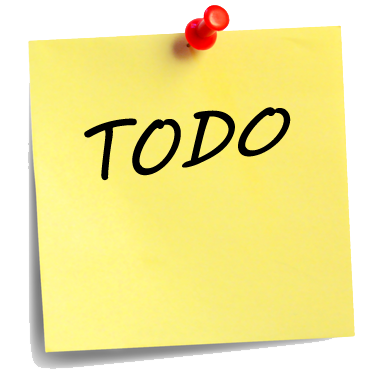
<style>
.page{position:relative;width:375px;height:375px;background:#ffffff}
.page>*{position:absolute;margin:0}
.t1{font:76px "MVBoli";color:#000000}
</style>
<div class="page">
<p class="t1" style="left:84px;top:107px;width:207px;height:74px">TODO</p>
</div>
